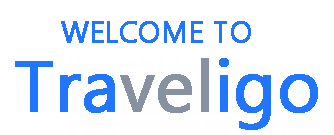
<style>
.page{position:relative;width:334px;height:135px;background:#ffffff}
.page>*{position:absolute;margin:0}
.t1{font:28.7px "MicrosoftTaiLe";color:#2176ff;font-weight:bold}
.t2{font:71.5px "MicrosoftTaiLe";color:#2176ff;font-weight:bold}
.t3{font:71.5px "MicrosoftTaiLe";color:#8791a0;font-weight:bold}
</style>
<div class="page">
<p class="t1" style="left:61px;top:21px;width:190px;height:22px">WELCOME TO</p>
<p class="t2" style="left:15px;top:58px;width:303px;height:72px">Tra<span class="t3">vel</span>igo</p>
</div>
